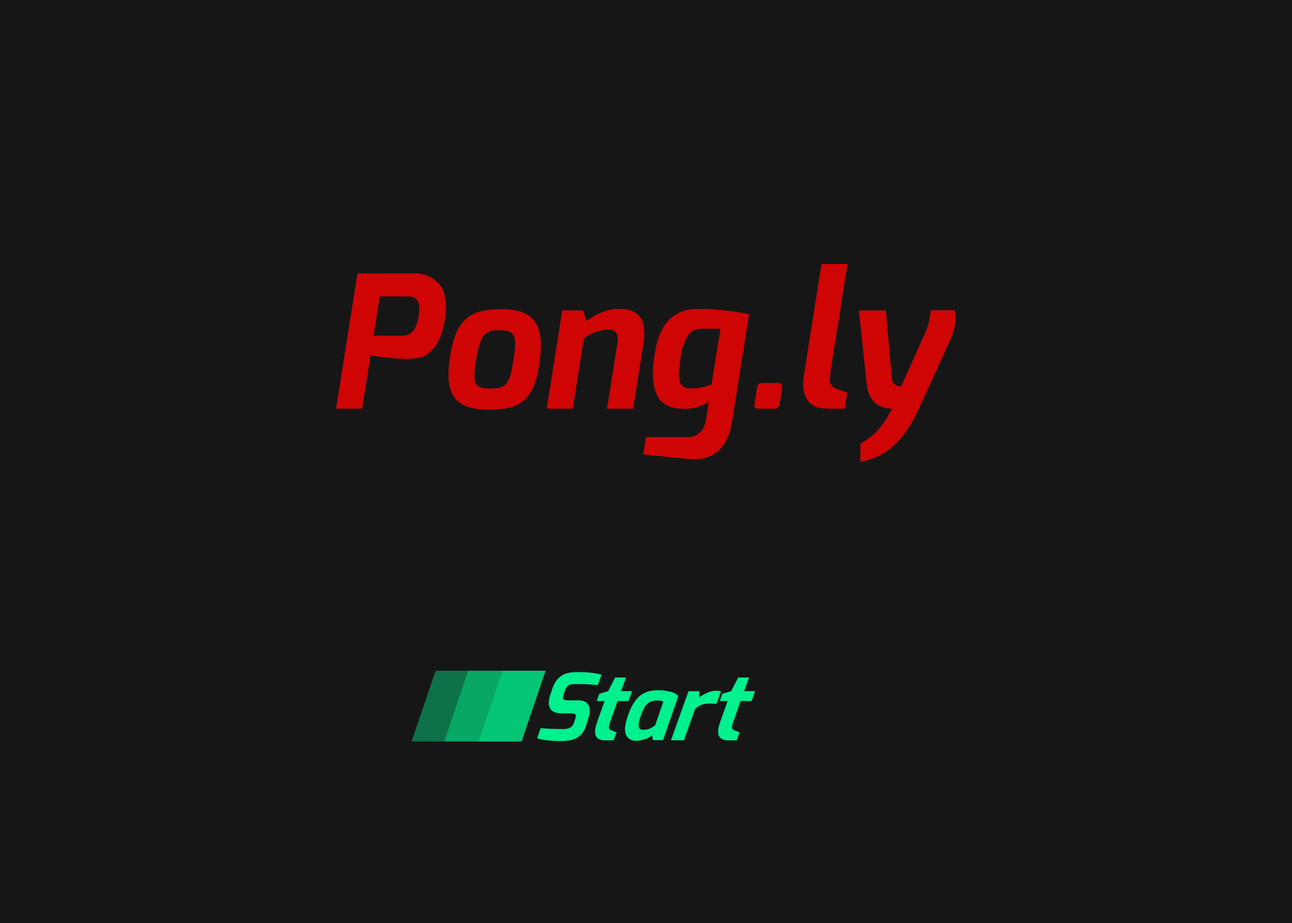
<style>
.page{position:relative;width:1292px;height:923px;background:#161616}
.page>*{position:absolute;margin:0}
.t1{font:184.6px "Exo-BoldItalic";color:#d00505}
</style>
<div class="page">
<p class="t1" style="left:336px;top:264px;width:620px;height:198px">Pong.ly</p>
</div>
